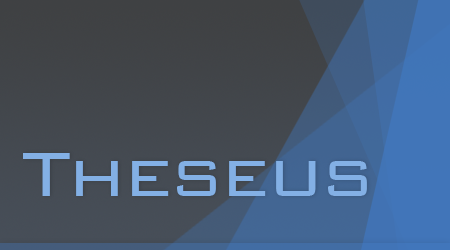
<style>
.page{position:relative;width:450px;height:250px}
.page>*{position:absolute;margin:0}
.t1{font:83.4px "BankGothicBT-Light";letter-spacing:-0.025em;color:#83b0e5}
</style>
<div class="page">
<p class="t1" style="left:23px;top:153px;width:344px;height:43px">Theseus</p>
</div>
